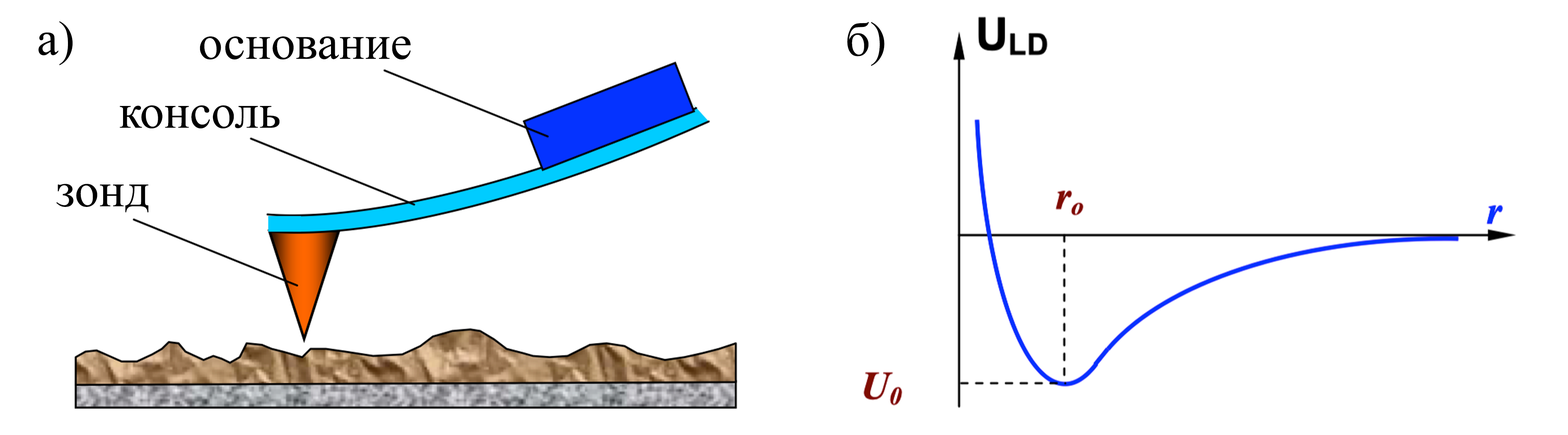
<style>
.page{position:relative;width:1568px;height:435px;background:#ffffff}
.page>*{position:absolute;margin:0}
.t1{font:48.3px "TimesNewRomanPSMT";color:#000000}
</style>
<div class="page">
<p class="t1" style="left:39px;top:21px;width:34px;height:44px">а)</p>
<p class="t1" style="left:847px;top:22px;width:37px;height:44px">б)</p>
<p class="t1" style="left:200px;top:36px;width:211px;height:24px">основание</p>
<p class="t1" style="left:120px;top:105px;width:160px;height:24px">консоль</p>
<p class="t1" style="left:56px;top:184px;width:93px;height:29px">зонд</p>
</div>
